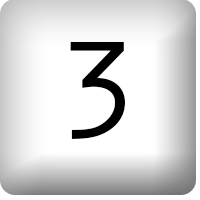
<style>
.page{position:relative;width:200px;height:200px;background:#ffffff}
.page>*{position:absolute;margin:0}
.t1{font:144.2px "OratorStd";color:#000000}
</style>
<div class="page">
<p class="t1" style="left:70px;top:41px;width:55px;height:98px">3</p>
</div>
